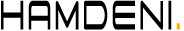
<style>
.page{position:relative;width:184px;height:31px;background:#ffffff}
.page>*{position:absolute;margin:0}
.t1{font:52.3px "Suissnord";letter-spacing:0.16em;color:#000000;scale:0.47 1}
.t2{font:65.4px "Suissnord";letter-spacing:0.16em;color:#ffae00;scale:0.47 1}
</style>
<div class="page">
<p class="t1" style="left:1px;top:0px;width:179px;height:30px">HAMDENI<span class="t2">.</span></p>
</div>
